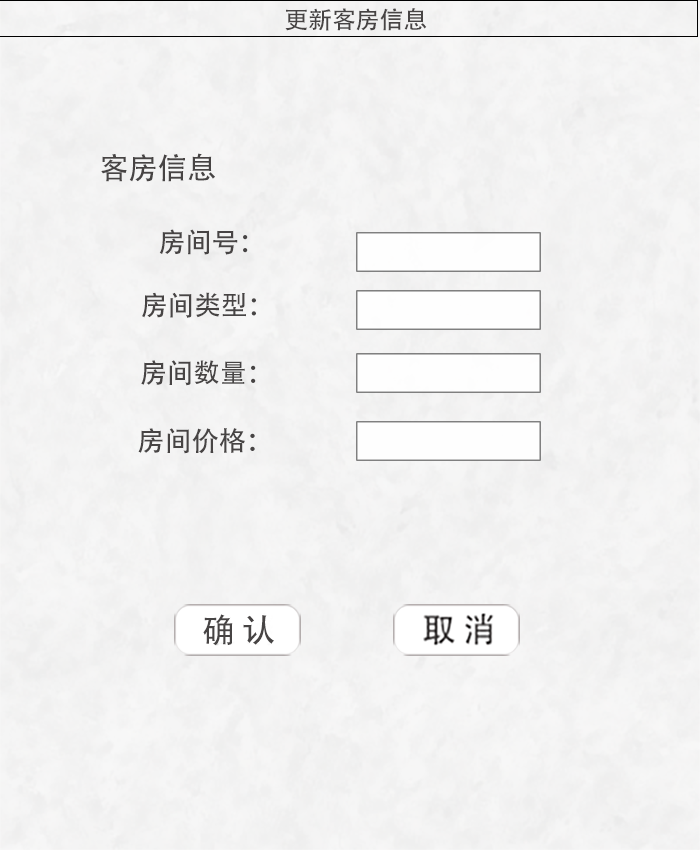
<style>
.page{position:relative;width:700px;height:850px}
.page>*{position:absolute;margin:0}
.t1{font:24px "AdobeHeitiStd-Regular";letter-spacing:-0.005em;color:#474444;text-transform:uppercase}
.t2{font:29.7px "AdobeHeitiStd-Regular";letter-spacing:-0.005em;color:#474444;text-transform:uppercase}
.t3{font:27px "AdobeHeitiStd-Regular";letter-spacing:-0.005em;color:#474444;text-transform:uppercase}
</style>
<div class="page">
<p class="t1" style="left:285px;top:8px;width:142px;height:23px">更新客房信息</p>
<p class="t2" style="left:101px;top:153px;width:114px;height:29px">客房信息</p>
<p class="t3" style="left:159px;top:229px;width:89px;height:26px">房间号：</p>
<p class="t3" style="left:142px;top:292px;width:114px;height:26px">房间类型：</p>
<p class="t3" style="left:141px;top:360px;width:115px;height:26px">房间数量：</p>
<p class="t3" style="left:138px;top:428px;width:117px;height:26px">房间价格：</p>
</div>
